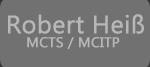
<style>
.page{position:relative;width:150px;height:67px;background:#717171}
.page>*{position:absolute;margin:0}
.t1{font:25px "MicrosoftTaiLe";color:#b8b8b8;font-weight:bold}
.t2{font:14px "MicrosoftTaiLe";color:#b7b7b7;font-weight:bold}
</style>
<div class="page">
<p class="t1" style="left:8px;top:14px;width:136px;height:20px">Robert Heiß</p>
<p class="t2" style="left:27px;top:37px;width:93px;height:12px">MCTS / MCITP</p>
</div>
